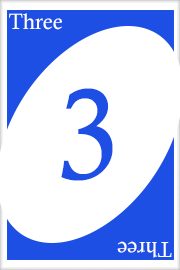
<style>
.page{position:relative;width:180px;height:270px;background:#ffffff}
.page>*{position:absolute;margin:0}
.t1{font:22px "CalistoMT";color:#ffffff}
.t2{font:128px "CalistoMT";color:#1d4fe4}
.t3{font:21.7px "CalistoMT";color:#ffffff}
</style>
<div class="page">
<p class="t1" style="left:9px;top:13px;width:53px;height:17px">Three</p>
<p class="t2" style="left:61px;top:88px;width:52px;height:93px">3</p>
<p class="t3" style="left:117px;top:241px;width:55px;height:17px;rotate:180deg">Three</p>
</div>
